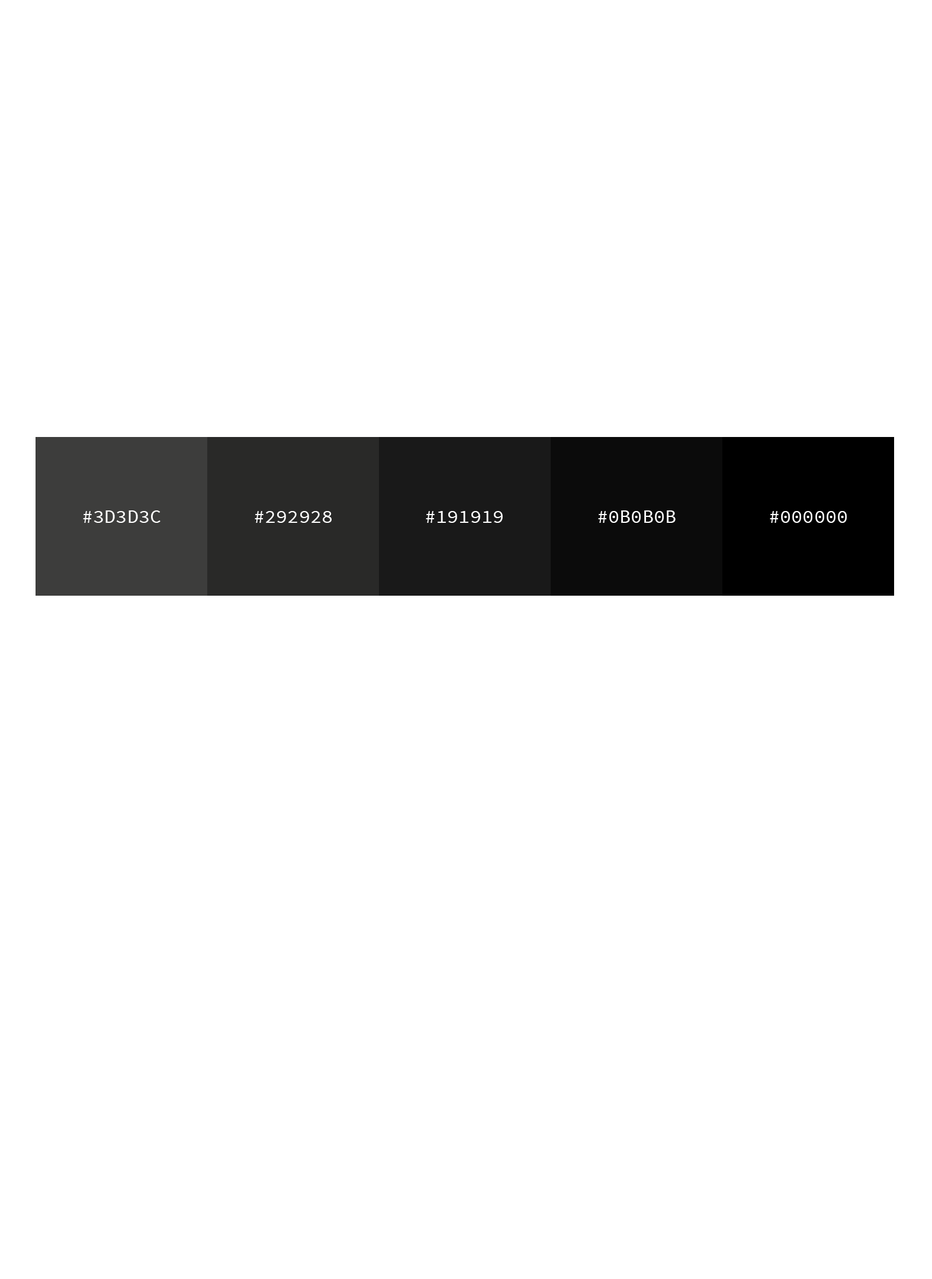
<style>
.page{position:relative;width:932px;height:1279px;background:#ffffff}
.page>*{position:absolute;margin:0}
.t1{font:19px "SourceCodePro-Regular";color:#ffffff;text-transform:uppercase}
</style>
<div class="page">
<p class="t1" style="left:83px;top:510px;width:77px;height:13px">#3d3d3c</p>
<p class="t1" style="left:255px;top:511px;width:77px;height:12px">#292928</p>
<p class="t1" style="left:426px;top:511px;width:77px;height:12px">#191919</p>
<p class="t1" style="left:598px;top:510px;width:78px;height:13px">#0B0B0B</p>
<p class="t1" style="left:770px;top:511px;width:77px;height:12px">#000000</p>
</div>
